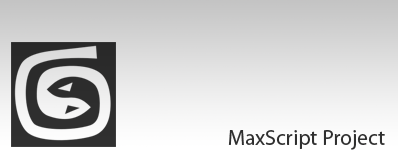
<style>
.page{position:relative;width:398px;height:159px}
.page>*{position:absolute;margin:0}
.t1{font:21.6px "MyriadPro-Regular";color:#2f2f2f}
</style>
<div class="page">
<p class="t1" style="left:228px;top:130px;width:157px;height:20px">MaxScript Project</p>
</div>
